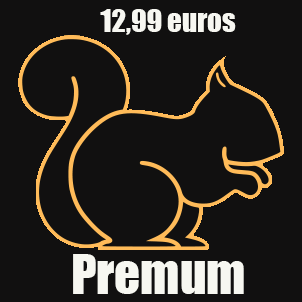
<style>
.page{position:relative;width:302px;height:302px;background:#111010}
.page>*{position:absolute;margin:0}
.t1{font:28.8px "Impact";color:#f7f7f1}
.t2{font:51px "Impact";color:#f7f7f1}
</style>
<div class="page">
<p class="t1" style="left:100px;top:9px;width:136px;height:26px">12,99 euros</p>
<p class="t2" style="left:73px;top:254px;width:171px;height:40px">Premum</p>
</div>
